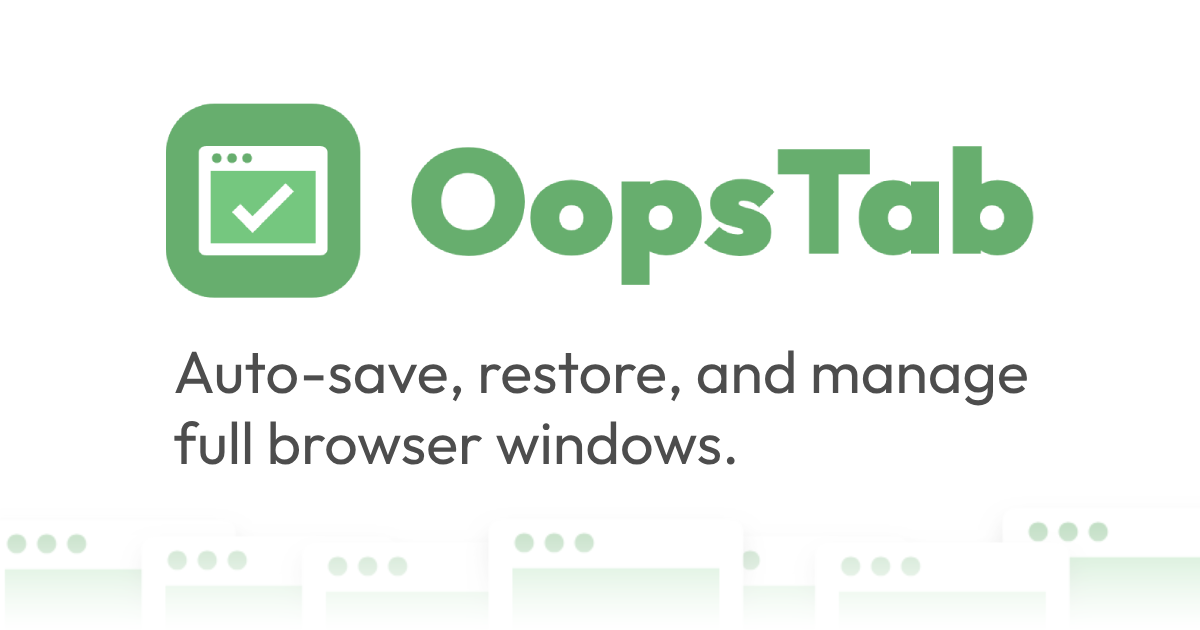
<style>
.page{position:relative;width:1200px;height:630px;background:#ffffff}
.page>*{position:absolute;margin:0}
.t1{font:59.5px "Outfit-Regular";color:#4d4d4d}
</style>
<div class="page">
<p class="t1" style="left:174px;top:350px;width:853px;height:115px">Auto-save, restore, and manage<br>full browser windows.</p>
</div>
